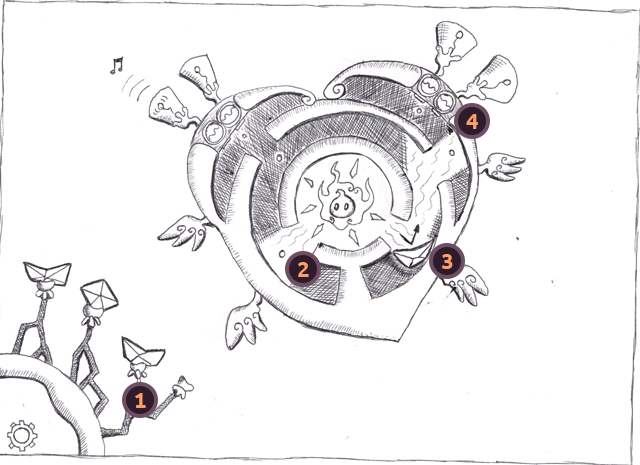
<style>
.page{position:relative;width:640px;height:465px;background:#ffffff}
.page>*{position:absolute;margin:0}
.t1{font:25px "UbuntuMono-Bold";color:#fc9f66}
</style>
<div class="page">
<p class="t1" style="left:466px;top:114px;width:12px;height:15px">4</p>
<p class="t1" style="left:442px;top:254px;width:11px;height:15px">3</p>
<p class="t1" style="left:298px;top:262px;width:11px;height:15px">2</p>
<p class="t1" style="left:135px;top:393px;width:11px;height:15px">1</p>
</div>
